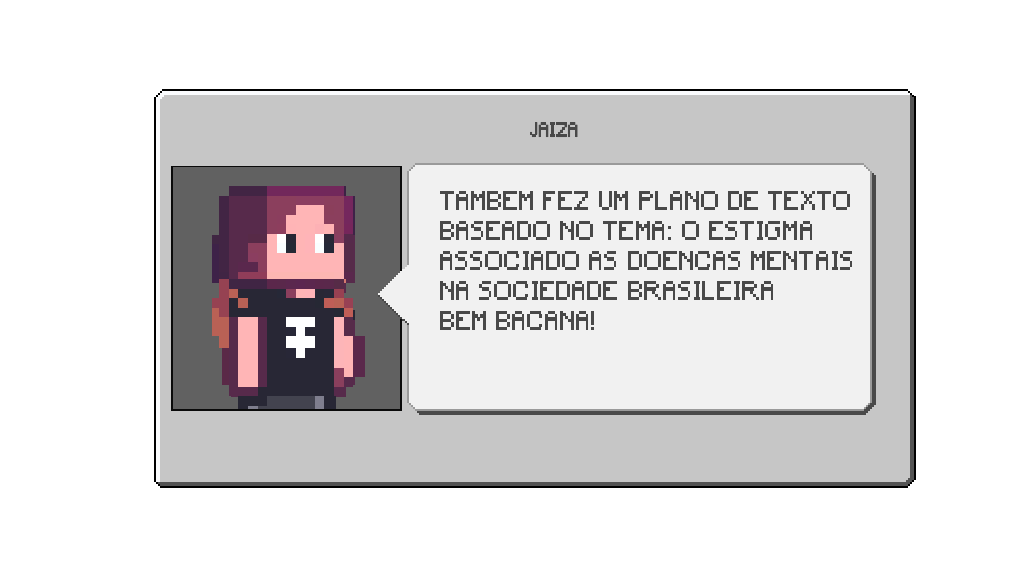
<style>
.page{position:relative;width:1024px;height:576px;background:#ffffff}
.page>*{position:absolute;margin:0}
.t1{font:19.6px "Minecraft";letter-spacing:0.02em;color:#494949;text-transform:uppercase;scale:0.86 1}
.t2{font:25.2px/30px "Minecraft";letter-spacing:0.05em;color:#494949;text-transform:uppercase;scale:0.86 1}
</style>
<div class="page">
<p class="t1" style="left:530px;top:122px;width:48px;height:16px">jaiza</p>
<p class="t2" style="left:440px;top:191px;width:412px;height:139px">tambem fez um plano de texto<br>baseado no tema: o estigma<br>associado as doencas mentais<br>na sociedade brasileira<br>bem bacana!</p>
</div>
